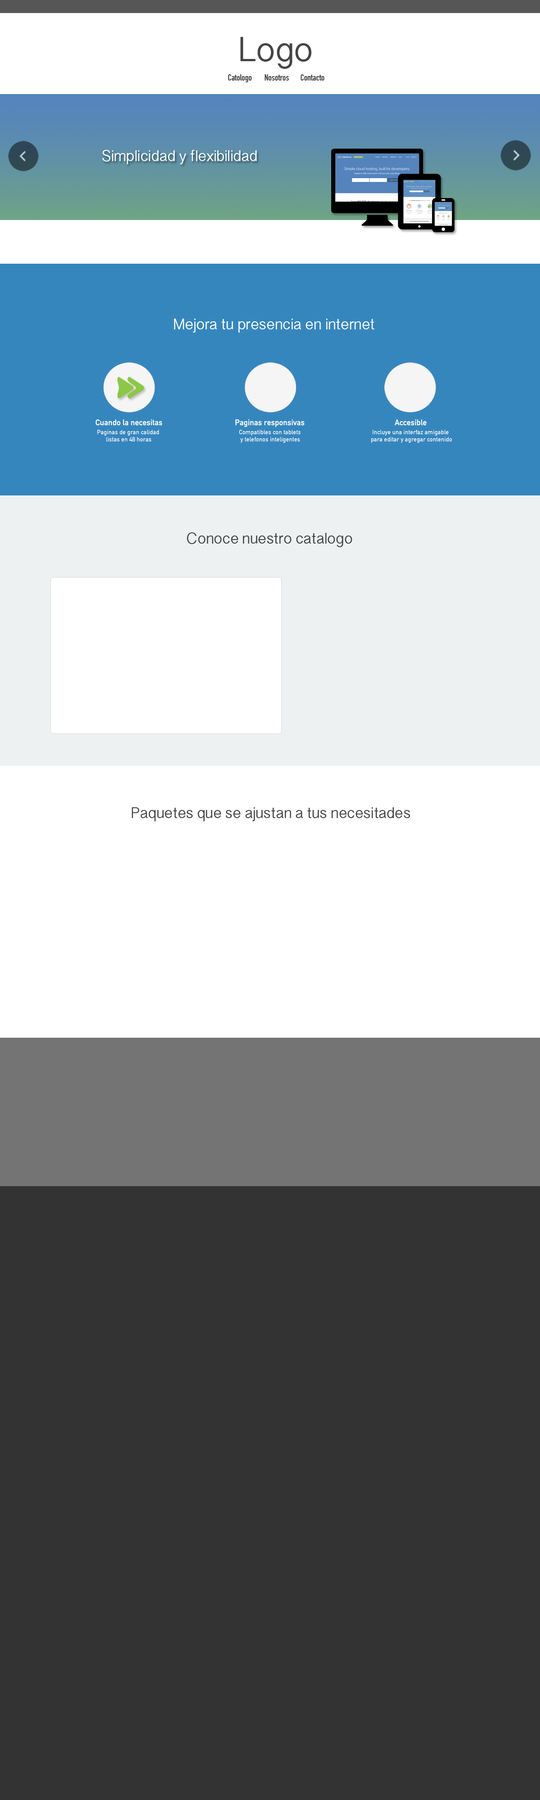
<style>
.page{position:relative;width:540px;height:1800px;background:#333333}
.page>*{position:absolute;margin:0}
.t1{font:32.4px "SinhalaSangamMN-Bold";color:#454545}
.t2{font:9px "DINCondensed-Bold";color:#454545}
.t3{font:14.4px "SinhalaSangamMN-Bold";color:#ffffff}
.t4{font:8px "DINAlternate-Bold";color:#ffffff}
.t5{font:6.2px "DINAlternate-Bold";color:#ffffff}
.t6{font:14.4px "SinhalaSangamMN-Bold";color:#454545}
</style>
<div class="page">
<p class="t1" style="left:240px;top:37px;width:71px;height:32px">Logo</p>
<p class="t2" style="left:228px;top:74px;width:24px;height:8px">Catologo</p>
<p class="t2" style="left:265px;top:74px;width:24px;height:7px">Nosotros</p>
<p class="t2" style="left:301px;top:74px;width:23px;height:7px">Contacto</p>
<p class="t3" style="left:102px;top:150px;width:155px;height:14px">Simplicidad y flexibilidad</p>
<p class="t3" style="left:174px;top:319px;width:200px;height:14px">Mejora tu presencia en internet</p>
<p class="t4" style="left:95px;top:419px;width:67px;height:7px">Cuando la necesitas</p>
<p class="t4" style="left:235px;top:419px;width:70px;height:8px">Paginas responsivas</p>
<p class="t4" style="left:395px;top:419px;width:32px;height:7px">Accesible</p>
<p class="t5" style="left:97px;top:430px;width:62px;height:11px">Paginas de gran calidad <br>      listas en 48 horas</p>
<p class="t5" style="left:239px;top:430px;width:62px;height:13px">Compatibles con tablets<br> y telefonos inteligentes</p>
<p class="t5" style="left:371px;top:430px;width:81px;height:13px">Incluye una interfaz amigable<br>para editar y agregar contenido</p>
<p class="t6" style="left:187px;top:532px;width:165px;height:15px">Conoce nuestro catalogo</p>
<p class="t6" style="left:132px;top:807px;width:278px;height:14px">Paquetes que se ajustan a tus necesitades</p>
</div>
